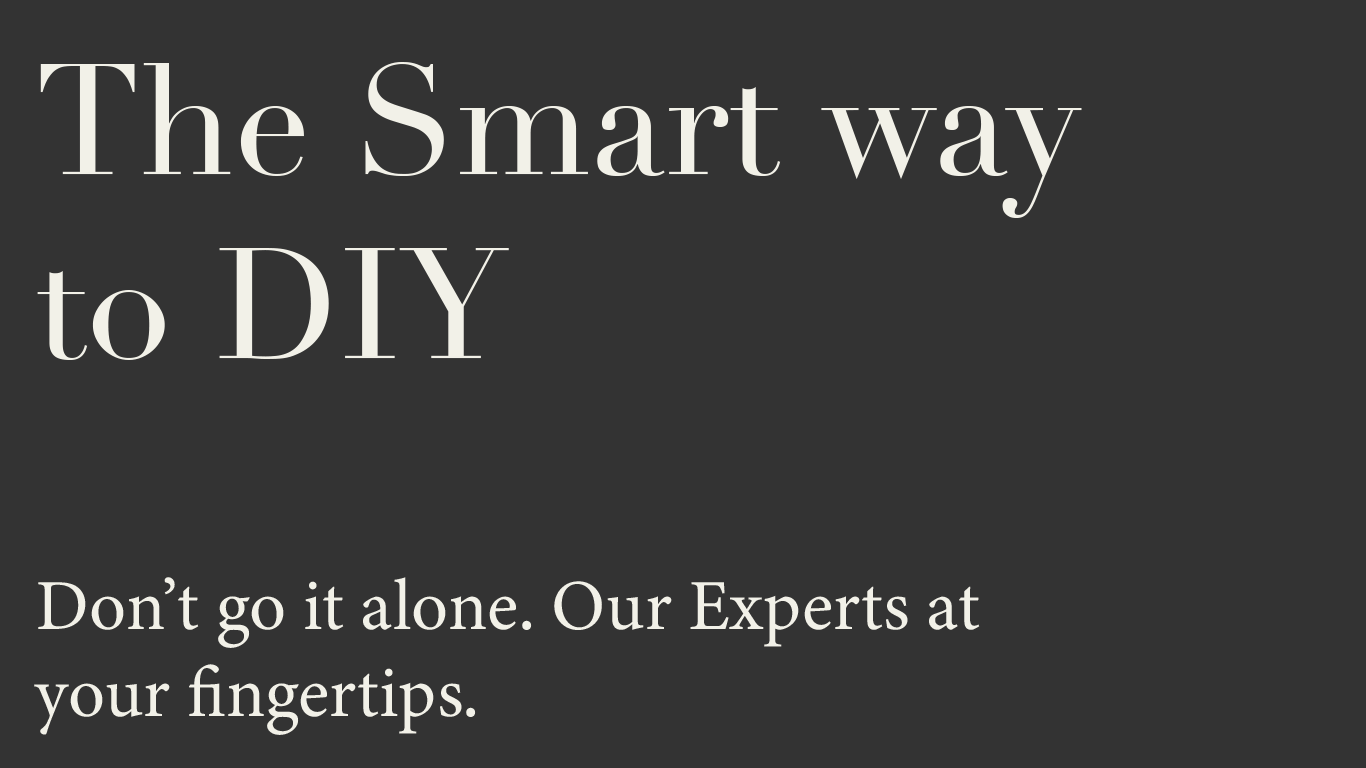
<style>
.page{position:relative;width:1366px;height:768px;background:#333333}
.page>*{position:absolute;margin:0}
.t1{font:71.9px "MinionVariableConcept-Roman";color:#f2f1e8}
.t2{font:154px "Didot";color:#f2f1e8}
</style>
<div class="page">
<p class="t1" style="left:34px;top:62px;width:1048px;height:673px"><span class="t2">The Smart way to DIY<br><br></span>Don’t go it alone. Our Experts at your fingertips.</p>
</div>
